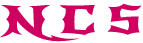
<style>
.page{position:relative;width:143px;height:43px;background:#ffffff}
.page>*{position:absolute;margin:0}
.t1{font:37.6px "NewRocker-Regular";letter-spacing:0.12em;color:#ce0060;scale:1.71 1}
</style>
<div class="page">
<p class="t1" style="left:0px;top:3px;width:142px;height:39px">NCS</p>
</div>
